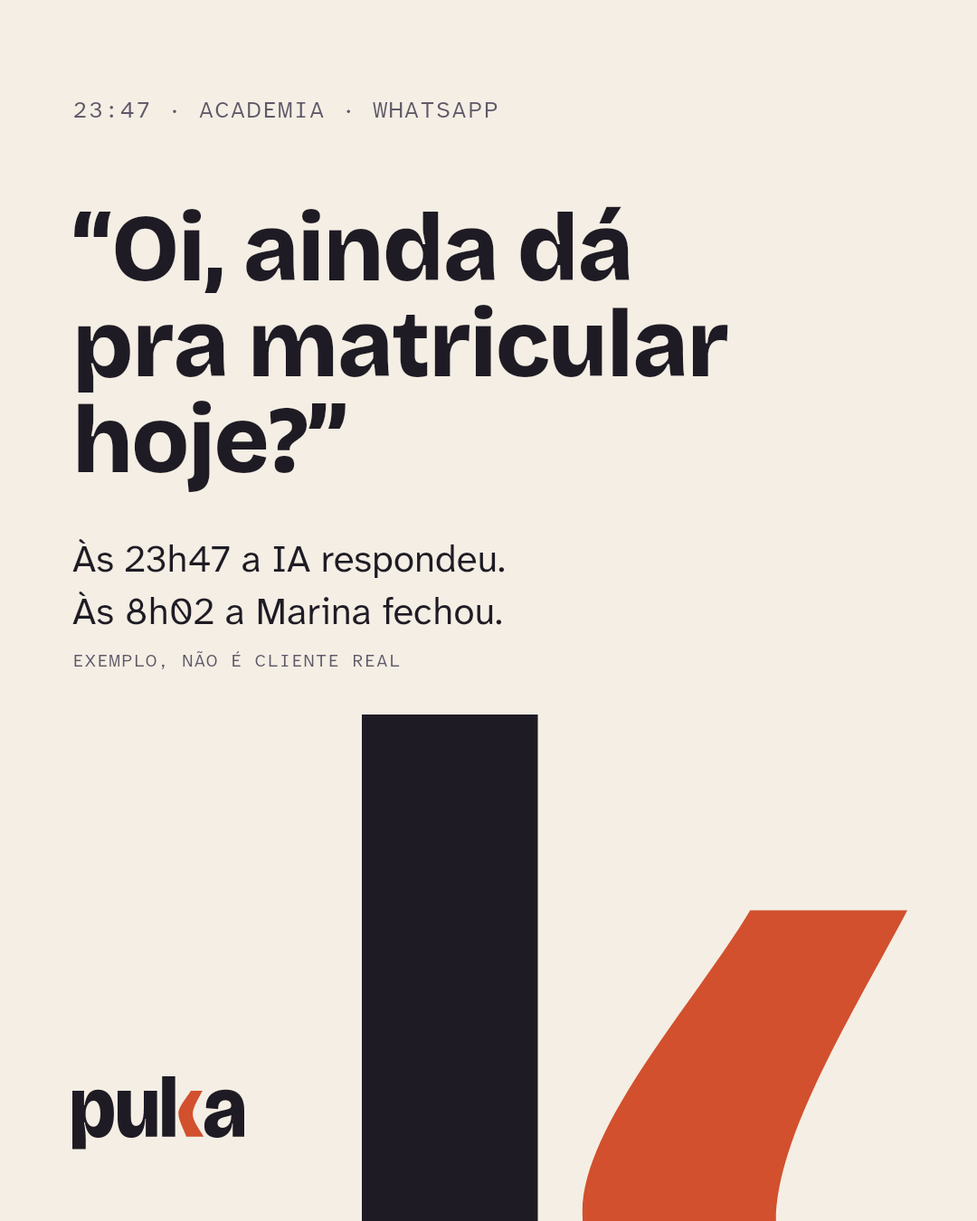
<style>
.page{position:relative;width:977px;height:1221px;background:#f4eee4}
.page>*{position:absolute;margin:0}
.t1{font:23.5px "AtkinsonHyperlegibleMono-Regular";letter-spacing:0.04em;color:#5e5868}
.t2{font:94.1px/95.9px "BricolageGrotesque-ExtraBold";letter-spacing:-0.012em;color:#1e1b24}
.t3{font:38px/52.5px "AtkinsonHyperlegibleNext-Regular";color:#1e1b24}
.t4{font:18.1px "AtkinsonHyperlegibleMono-Regular";letter-spacing:0.04em;color:#5e5868}
</style>
<div class="page">
<p class="t1" style="left:74px;top:102px;width:423px;height:16px">23:47 · ACADEMIA · WHATSAPP</p>
<p class="t2" style="left:74px;top:206px;width:654px;height:286px">“Oi, ainda dá<br>pra matricular<br>hoje?”</p>
<p class="t3" style="left:72px;top:539px;width:433px;height:86px">Às 23h47 a IA respondeu.<br>Às 8h02 a Marina fechou.</p>
<p class="t4" style="left:74px;top:651px;width:326px;height:18px">EXEMPLO, NÃO É CLIENTE REAL</p>
</div>
